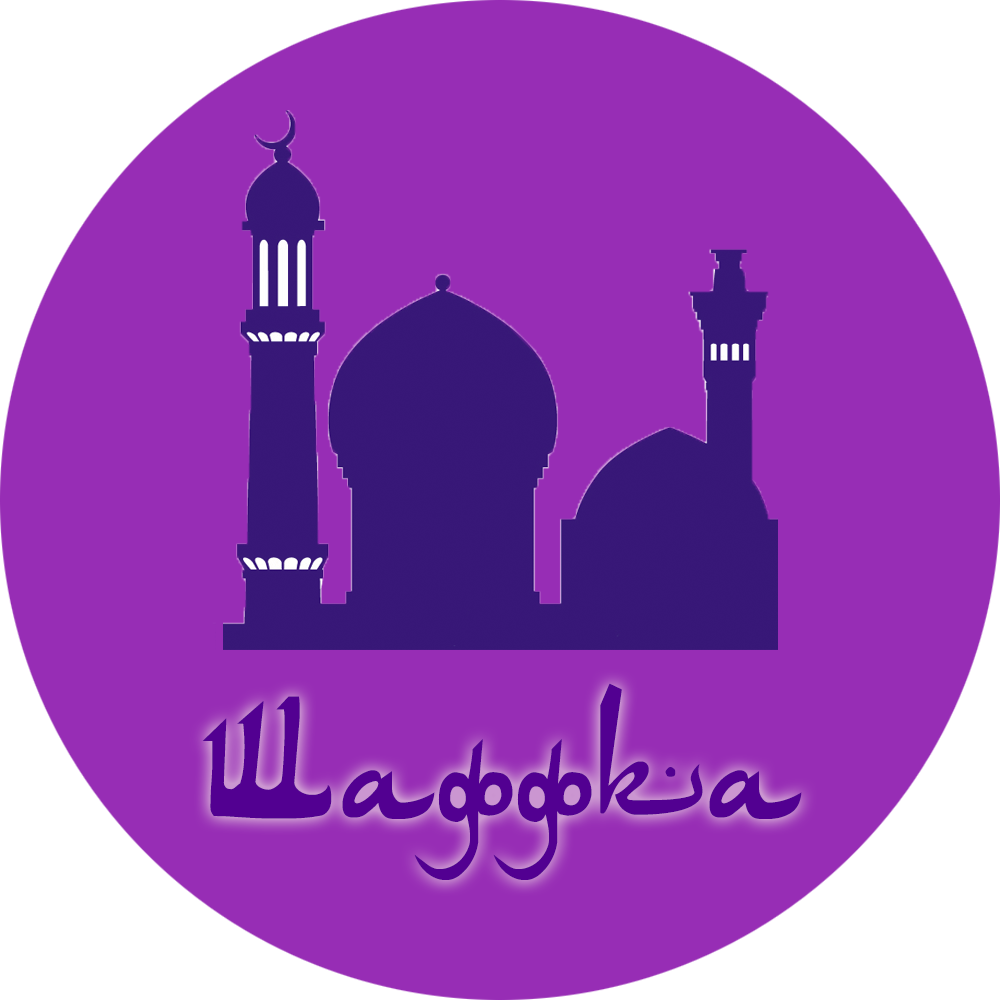
<style>
.page{position:relative;width:1000px;height:1000px;background:#972db5}
.page>*{position:absolute;margin:0}
.t1{font:252px "DSArabic";color:#520091}
</style>
<div class="page">
<p class="t1" style="left:202px;top:683px;width:600px;height:197px">Шаффка</p>
</div>
